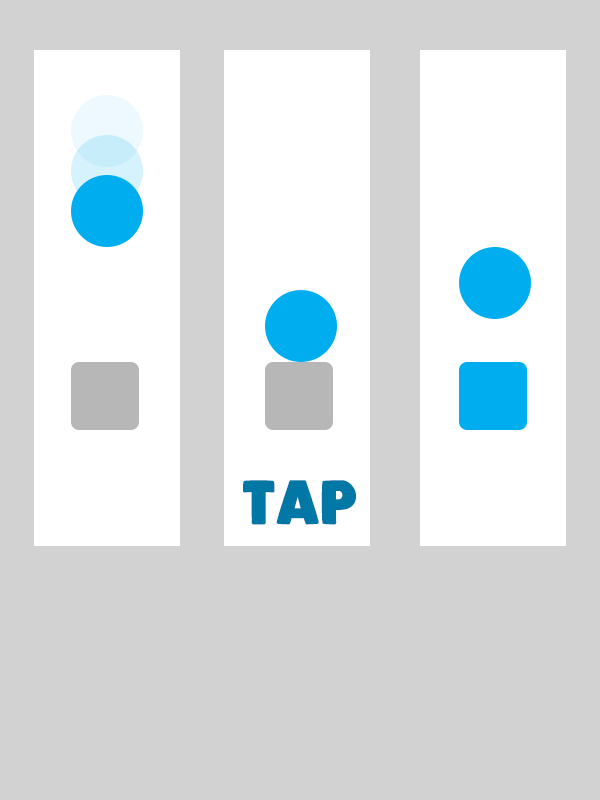
<style>
.page{position:relative;width:600px;height:800px;background:#d2d2d2}
.page>*{position:absolute;margin:0}
.t1{font:60px "Plump";color:#0077a4}
</style>
<div class="page">
<p class="t1" style="left:243px;top:480px;width:113px;height:45px">TAP</p>
</div>
